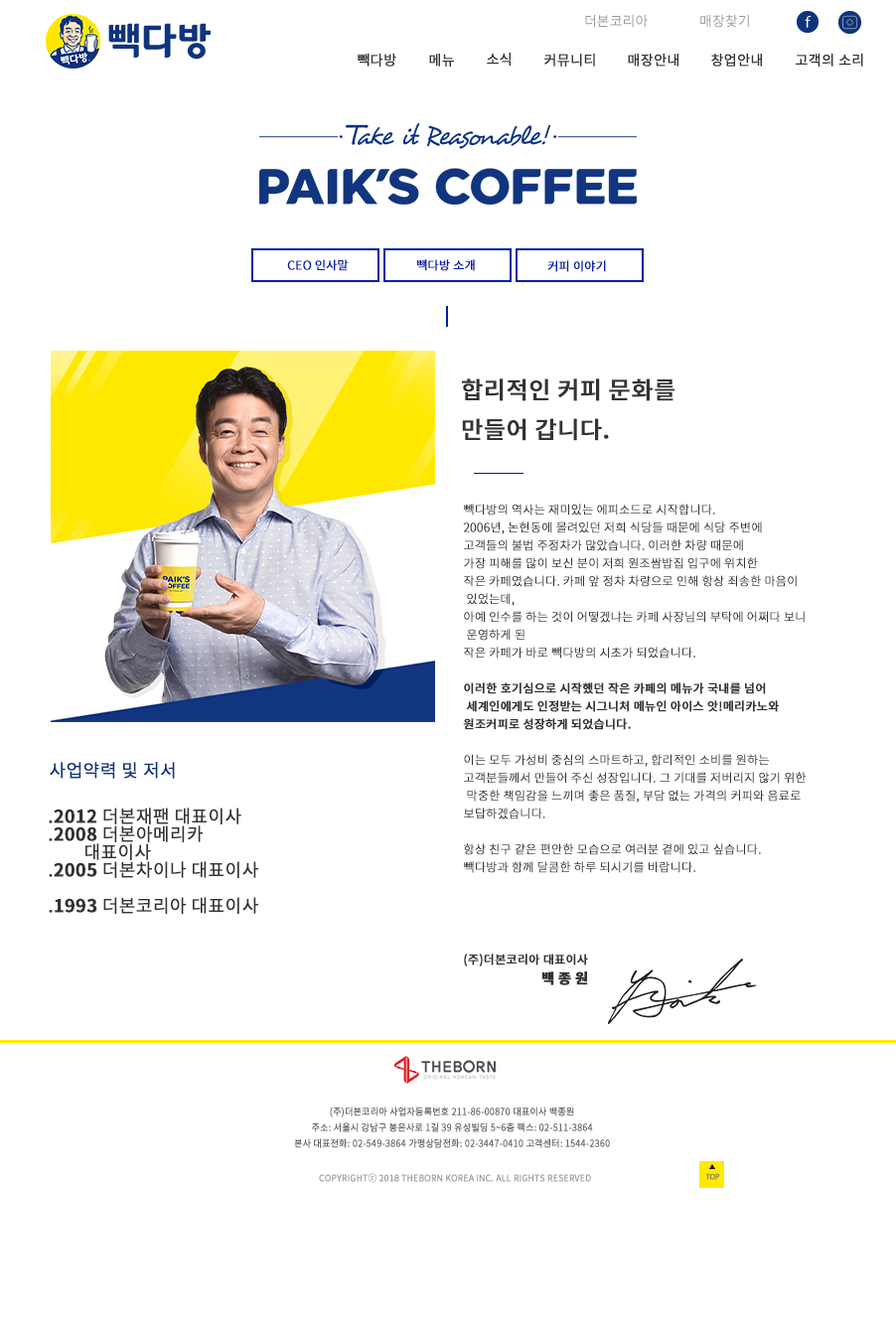
<style>
.page{position:relative;width:896px;height:1331px;background:#ffffff}
.page>*{position:absolute;margin:0}
.t1{font:13.9px "NotoSansKR-Regular";color:#999999}
.t2{font:13.9px "NotoSansKR-Regular";color:#333333;font-weight:bold}
.t3{font:11.9px "NotoSansKR-Regular";color:#041ea4;font-weight:bold}
.t4{font:23.8px/39.7px "NotoSansKR-Medium";color:#333333;font-weight:bold}
.t5{font:11.9px/17.9px "NotoSansKR-Light";color:#333333;font-weight:bold}
.t6{font:11.9px/17.9px "NotoSansKR-Medium";color:#333333;font-weight:bold}
.t7{font:17.9px "NotoSansKR-Regular";color:#11357f;font-weight:bold}
.t8{font:17.9px/17.9px "NotoSansKR-Regular";color:#333333;font-weight:bold}
.t9{font:17.9px/17.9px "NotoSansKR-Bold";color:#333333;font-weight:bold}
.t10{font:13.9px/17.9px "NotoSansKR-Black";color:#333333;font-weight:bold}
.t11{font:9.6px/15.9px "NotoSansKR-Regular";color:#666666;font-weight:bold;scale:0.94 1}
.t12{font:9.1px "NotoSansKR-Regular";color:#999999;font-weight:bold;scale:0.94 1}
.t13{font:8px "MyriadPro-Regular";color:#666666;font-weight:bold;scale:0.93 1}
</style>
<div class="page">
<p class="t1" style="left:585px;top:14px;width:63px;height:14px">더본코리아</p>
<p class="t1" style="left:700px;top:14px;width:49px;height:14px">매장찾기</p>
<p class="t2" style="left:358px;top:53px;width:38px;height:14px">빽다방</p>
<p class="t2" style="left:429px;top:54px;width:25px;height:13px">메뉴</p>
<p class="t2" style="left:487px;top:53px;width:24px;height:13px">소식</p>
<p class="t2" style="left:544px;top:53px;width:51px;height:14px">커뮤니티</p>
<p class="t2" style="left:628px;top:53px;width:50px;height:14px">매장안내</p>
<p class="t2" style="left:711px;top:53px;width:51px;height:14px">창업안내</p>
<p class="t2" style="left:796px;top:53px;width:67px;height:14px">고객의 소리</p>
<p class="t3" style="left:287px;top:259px;width:62px;height:12px">CEO 인사말</p>
<p class="t3" style="left:417px;top:259px;width:58px;height:12px">빽다방 소개</p>
<p class="t3" style="left:547px;top:260px;width:59px;height:12px">커피 이야기</p>
<p class="t4" style="left:462px;top:378px;width:213px;height:63px">합리적인 커피 문화를<br>만들어 갑니다.</p>
<p class="t5" style="left:463px;top:504px;width:344px;height:369px">빽다방의 역사는 재미있는 에피소드로 시작합니다.<br>2006년, 논현동에 몰려있던 저희 식당들 때문에 식당 주변에 <br>고객들의 불법 주정차가 많았습니다. 이러한 차량 때문에 <br>가장 피해를 많이 보신 분이 저희 원조쌈밥집 입구에 위치한 <br>작은 카페였습니다. 카페 앞 정차 차량으로 인해 항상 죄송한 마음이<br> 있었는데,<br>아예 인수를 하는 것이 어떻겠냐는 카페 사장님의 부탁에 어쩌다 보니<br> 운영하게 된<br>작은 카페가 바로 빽다방의 시초가 되었습니다.<br><br><span class="t6">이러한 호기심으로 시작했던 작은 카페의 메뉴가 국내를 넘어<br> 세계인에게도 인정받는 시그니처 메뉴인 아이스 앗!메리카노와 <br>원조커피로 성장하게 되었습니다.<br></span><br>이는 모두 가성비 중심의 스마트하고, 합리적인 소비를 원하는 <br>고객분들께서 만들어 주신 성장입니다. 그 기대를 저버리지 않기 위한<br> 막중한 책임감을 느끼며 좋은 품질, 부담 없는 가격의 커피와 음료로 <br>보답하겠습니다.<br><br>항상 친구 같은 편안한 모습으로 여러분 곁에 있고 싶습니다.<br>빽다방과 함께 달콤한 하루 되시기를 바랍니다.</p>
<p class="t7" style="left:50px;top:762px;width:125px;height:17px">사업약력 및 저서</p>
<p class="t8" style="left:49px;top:808px;width:209px;height:106px">.<span class="t9">2012</span> 더본재팬 대표이사<br>.<span class="t9">2008 </span>더본아메리카 <br> 대표이사<br>.<span class="t9">2005</span> 더본차이나 대표이사<br><br>.<span class="t9">1993</span> 더본코리아 대표이사</p>
<p class="t6" style="left:464px;top:954px;width:124px;height:31px;text-align:right">(주)더본코리아 대표이사<br><span class="t10">백 종 원</span></p>
<p class="t11" style="left:294px;top:1106px;width:316px;height:42px;text-align:center">(주)더본코리아 사업자등록번호 211-86-00870 대표이사 백종원<br>주소: 서울시 강남구 봉은사로 1길 39 유성빌딩 5~6층 팩스: 02-511-3864<br>본사 대표전화: 02-549-3864 가맹상담전화: 02-3447-0410 고객센터: 1544-2360</p>
<p class="t12" style="left:319px;top:1173px;width:272px;height:10px">COPYRIGHTⓒ 2018 THEBORN KOREA INC. ALL RIGHTS RESERVED</p>
<p class="t13" style="left:705px;top:1173px;width:14px;height:7px">TOP</p>
</div>
